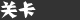
<style>
.page{position:relative;width:80px;height:20px;background:#333333}
.page>*{position:absolute;margin:0}
.t1{font:18px "JJianzi";color:#ffffff}
</style>
<div class="page">
<p class="t1" style="left:0px;top:1px;width:36px;height:18px">关卡</p>
</div>
